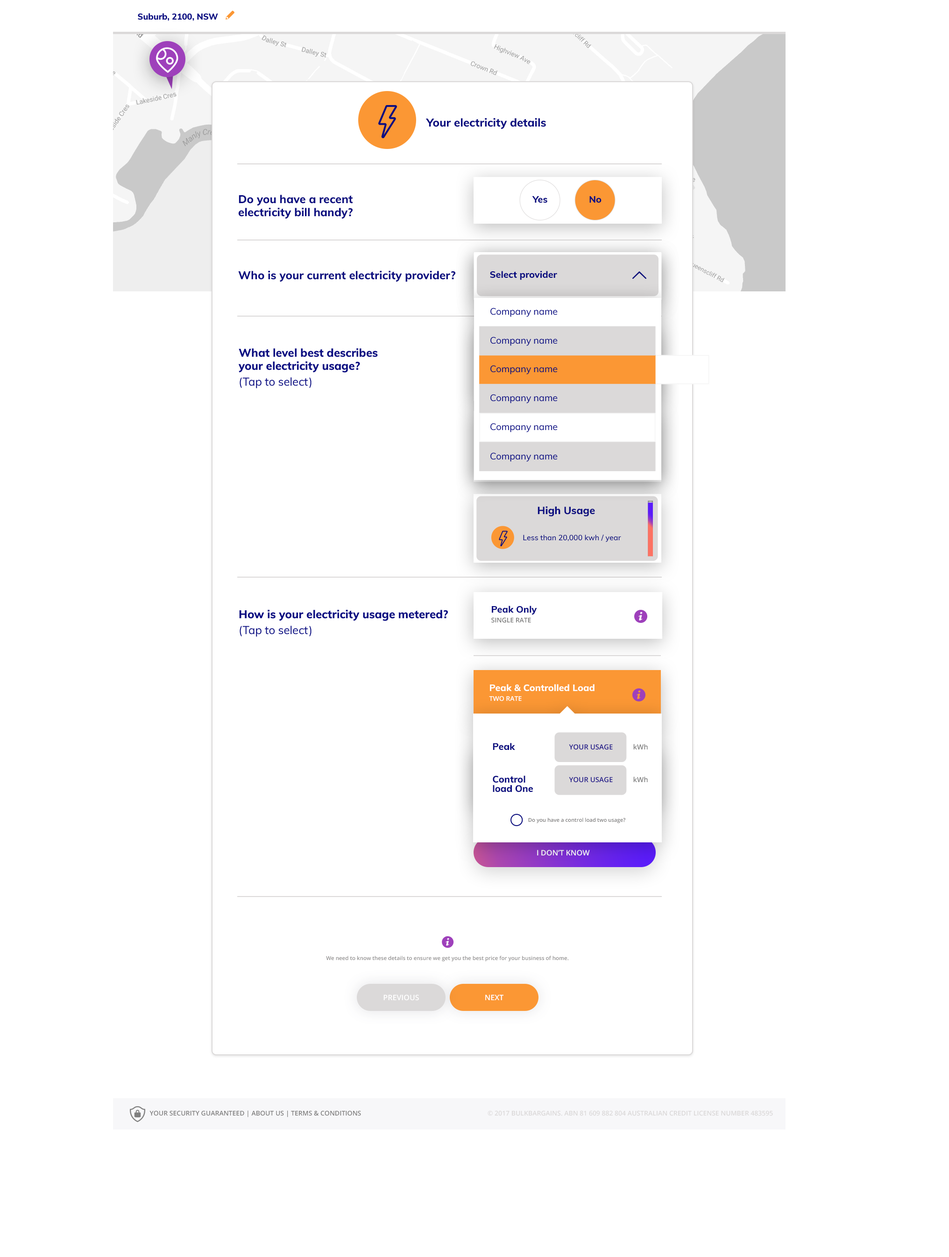
<style>
.page{position:relative;width:949px;height:1257px;background:#ffffff}
.page>*{position:absolute;margin:0}
.t1{font:8.4px "Muli-ExtraBold";color:#0a0d80}
.t2{font:11.2px "Muli-ExtraBold";color:#0a0d80}
.t3{font:11.2px/13.1px "Muli-ExtraBold";color:#0a0d80}
.t4{font:9.3px "Muli-ExtraBold";color:#0a0d80}
.t5{font:9.3px "Muli-Regular";color:#0a0d80}
.t6{font:11.2px/13.1px "Muli-Regular";color:#0a0d80}
.t7{font:10.3px "Muli-ExtraBold";color:#0a0d80}
.t8{font:7.5px "Muli-SemiBold";color:#0a0d80}
.t9{font:6.5px "OpenSans-Semibold";color:#7f7f7f;text-transform:uppercase}
.t10{font:9.3px "Muli-ExtraBold";color:#ffffff}
.t11{font:6.5px "OpenSans-Semibold";color:#ffffff;text-transform:uppercase}
.t12{font:7px "OpenSans-Semibold";color:#1d1489;text-transform:uppercase}
.t13{font:7px "OpenSans-Semibold";color:#7f7f7f}
.t14{font:9.3px/9.3px "Muli-ExtraBold";color:#0a0d80}
.t15{font:5.2px "OpenSans-Semibold";color:#807f7f}
.t16{font:7.5px "OpenSans-Semibold";color:#ffffff;text-transform:uppercase}
.t17{font:5.4px "OpenSans-Semibold";color:#918f8f}
.t18{font:6.5px "OpenSans-Semibold";color:#807f7f;text-transform:uppercase}
.t19{font:6.5px "OpenSans-Semibold";color:#dbd9d9;text-transform:uppercase}
</style>
<div class="page">
<p class="t1" style="left:138px;top:13px;width:80px;height:8px">Suburb, 2100, NSW</p>
<p class="t2" style="left:425px;top:118px;width:121px;height:11px">Your electricity details</p>
<p class="t3" style="left:238px;top:195px;width:115px;height:24px">Do you have a recent <br>electricity bill handy?</p>
<p class="t4" style="left:532px;top:196px;width:15px;height:7px">Yes</p>
<p class="t4" style="left:589px;top:196px;width:12px;height:7px">No</p>
<p class="t2" style="left:238px;top:271px;width:217px;height:11px">Who is your current electricity provider?</p>
<p class="t4" style="left:490px;top:271px;width:67px;height:9px">Select provider</p>
<p class="t5" style="left:490px;top:308px;width:67px;height:9px">Company name</p>
<p class="t5" style="left:490px;top:337px;width:67px;height:9px">Company name</p>
<p class="t3" style="left:238px;top:348px;width:140px;height:40px">What level best describes <br>your electricity usage?<br><span class="t6">(Tap to select)</span></p>
<p class="t5" style="left:490px;top:365px;width:67px;height:9px">Company name</p>
<p class="t5" style="left:490px;top:394px;width:67px;height:9px">Company name</p>
<p class="t5" style="left:490px;top:423px;width:67px;height:9px">Company name</p>
<p class="t5" style="left:490px;top:452px;width:67px;height:10px">Company name</p>
<p class="t7" style="left:537px;top:506px;width:58px;height:10px">High Usage</p>
<p class="t8" style="left:523px;top:535px;width:98px;height:7px">Less than 20,000 kwh / year</p>
<p class="t4" style="left:492px;top:606px;width:45px;height:9px">Peak Only</p>
<p class="t3" style="left:239px;top:610px;width:209px;height:27px">How is your electricity usage metered?<br><span class="t6">(Tap to select)</span></p>
<p class="t9" style="left:491px;top:617px;width:40px;height:6px">Single Rate</p>
<p class="t10" style="left:490px;top:684px;width:104px;height:7px">Peak &amp; Controlled Load</p>
<p class="t11" style="left:489px;top:696px;width:33px;height:5px">Two Rate</p>
<p class="t4" style="left:493px;top:743px;width:22px;height:7px">Peak</p>
<p class="t12" style="left:569px;top:744px;width:44px;height:6px">Your usage</p>
<p class="t13" style="left:633px;top:744px;width:15px;height:5px">kWh</p>
<p class="t14" style="left:493px;top:776px;width:40px;height:16px">Control <br>load One</p>
<p class="t12" style="left:569px;top:777px;width:44px;height:6px">Your usage</p>
<p class="t13" style="left:633px;top:776px;width:15px;height:6px">kWh</p>
<p class="t15" style="left:528px;top:818px;width:97px;height:5px">Do you have a control load two usage?</p>
<p class="t16" style="left:537px;top:850px;width:53px;height:6px">I don’t know</p>
<p class="t17" style="left:326px;top:956px;width:243px;height:5px">We need to know these details to ensure we get you the best price for your business of home.</p>
<p class="t16" style="left:383px;top:994px;width:36px;height:7px">Previous</p>
<p class="t16" style="left:485px;top:994px;width:18px;height:6px">NEXT</p>
<p class="t18" style="left:149px;top:1110px;width:212px;height:7px">Your security guaranteed | about us | Terms &amp; Conditions</p>
<p class="t19" style="left:487px;top:1110px;width:286px;height:6px">© 2017 Bulkbargains. ABN 81 609 882 804 Australian Credit License Number 483595</p>
</div>
